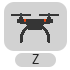
<style>
.page{position:relative;width:70px;height:70px;background:#d2d2d2}
.page>*{position:absolute;margin:0}
.t1{font:13.3px "Monaco";color:#262626}
</style>
<div class="page">
<p class="t1" style="left:32px;top:54px;width:7px;height:10px">Z</p>
</div>
